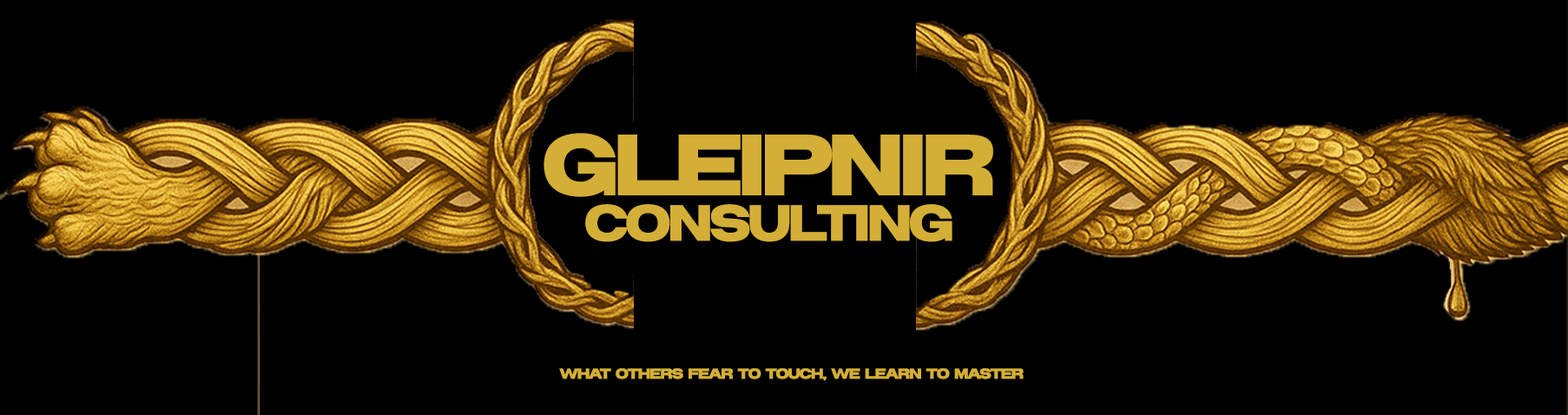
<style>
.page{position:relative;width:1568px;height:415px;background:#000000}
.page>*{position:absolute;margin:0}
.t1{font:50.6px/45.5px "GreaterTheoryRegular";letter-spacing:-0.075em;color:#d4af37}
.t2{font:86.3px/45.5px "GreaterTheoryRegular";letter-spacing:-0.075em;color:#d4af37}
.t3{font:14.3px "GreaterTheoryRegular";letter-spacing:-0.075em;color:#d4af37}
</style>
<div class="page">
<p class="t1" style="left:544px;top:133px;width:449px;height:109px;text-align:center"><span class="t2">Gleipnir<br></span>Consulting</p>
<p class="t3" style="left:559px;top:368px;width:465px;height:13px">What Others Fear To Touch, We learn to master</p>
</div>
